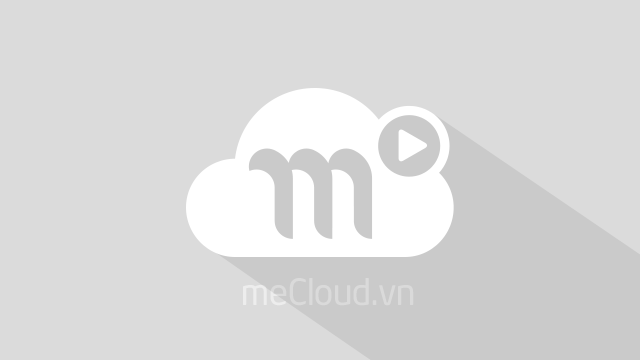
<style>
.page{position:relative;width:640px;height:360px;background:#dbdbdb}
.page>*{position:absolute;margin:0}
.t1{font:36px "UTM-Neo-Sans-Intel";color:#dadada}
</style>
<div class="page">
<p class="t1" style="left:243px;top:278px;width:171px;height:28px">meCloud.vn</p>
</div>
